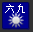
<style>
.page{position:relative;width:33px;height:32px;background:#000090}
.page>*{position:absolute;margin:0}
.t1{font:10.4px "SimSun";color:#ffffff}
</style>
<div class="page">
<p class="t1" style="left:5px;top:4px;width:20px;height:9px">六九</p>
</div>
